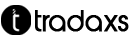
<style>
.page{position:relative;width:132px;height:38px;background:#ffffff}
.page>*{position:absolute;margin:0}
.t1{font:26.7px "AbeatbyKai";color:#000000;font-weight:bold}
</style>
<div class="page">
<p class="t1" style="left:35px;top:10px;width:94px;height:22px">tradaxs</p>
</div>
